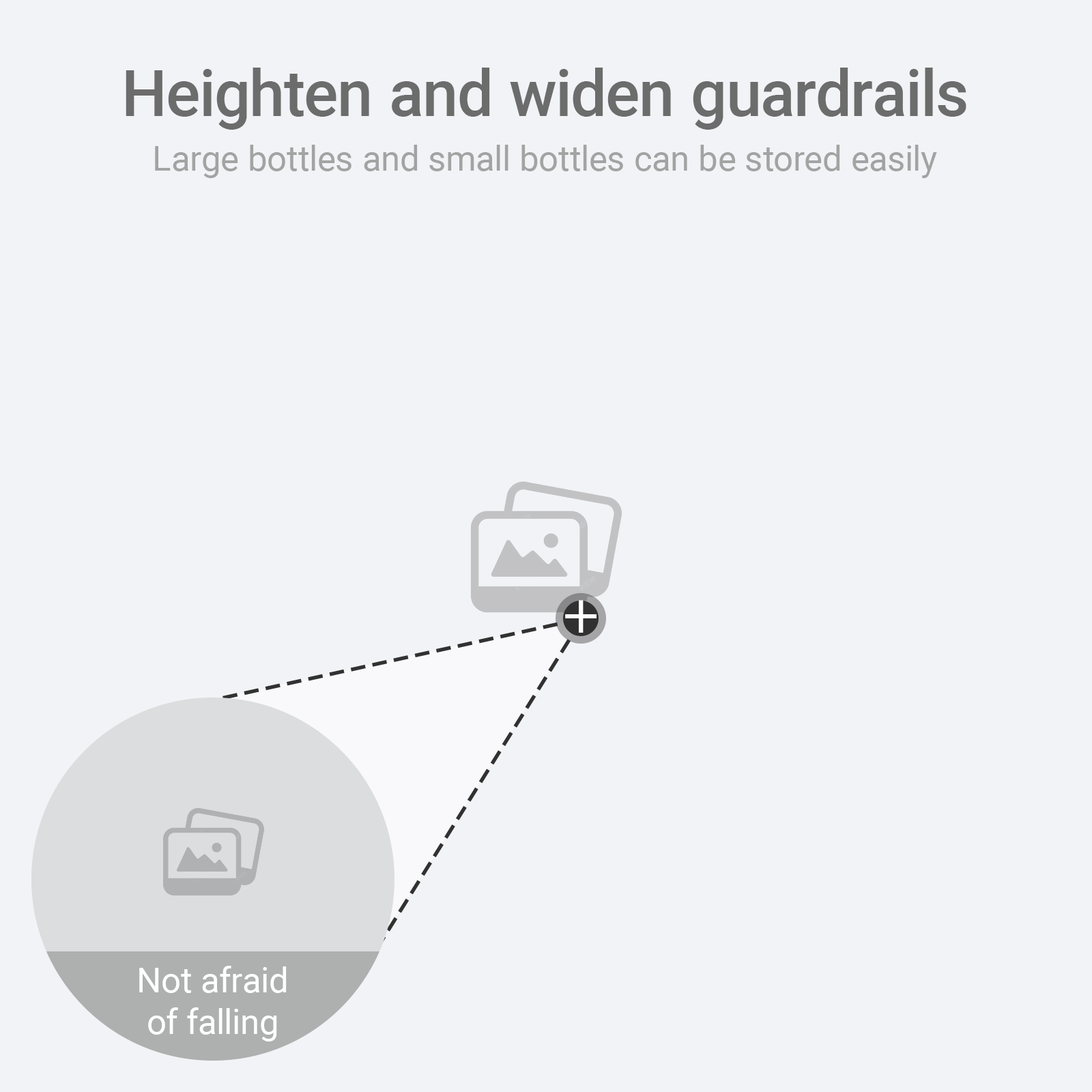
<style>
.page{position:relative;width:1092px;height:1092px;background:#f2f3f6}
.page>*{position:absolute;margin:0}
.t1{font:64.1px "Roboto-Medium";color:#6c6c6c}
.t2{font:34.9px "Roboto-Regular";color:#a3a3a3}
.t3{font:53.2px "AdobeHeitiStd-Regular";color:#ffffff}
.t4{font:34.9px "Roboto-Regular";color:#ffffff}
</style>
<div class="page">
<p class="t1" style="left:126px;top:68px;width:840px;height:62px">Heighten and widen guardrails</p>
<p class="t2" style="left:155px;top:145px;width:782px;height:33px">Large bottles and small bottles can be stored easily</p>
<p class="t3" style="left:565px;top:600px;width:31px;height:33px">+</p>
<p class="t4" style="left:139px;top:966px;width:148px;height:75px;text-align:center">Not afraid<br>of falling</p>
</div>
